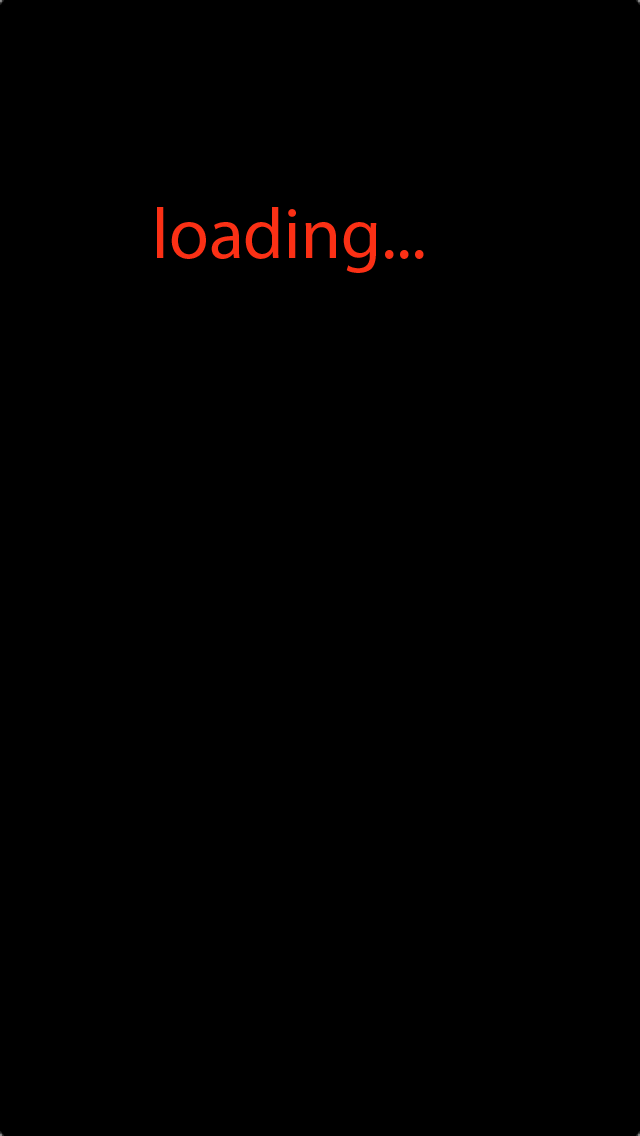
<style>
.page{position:relative;width:640px;height:1136px;background:#000000}
.page>*{position:absolute;margin:0}
.t1{font:72px "MyriadPro-Regular";color:#fb3015}
</style>
<div class="page">
<p class="t1" style="left:157px;top:207px;width:267px;height:66px">loading...</p>
</div>
